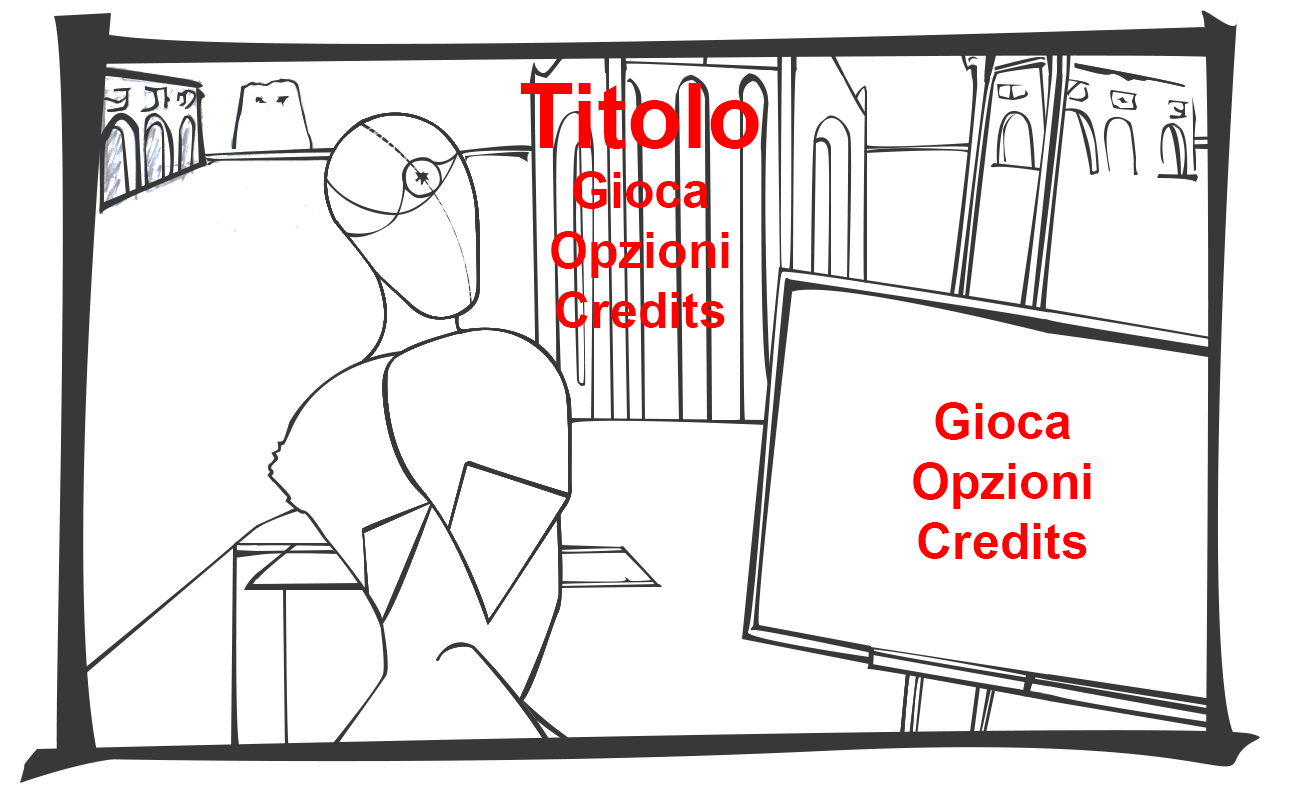
<style>
.page{position:relative;width:1300px;height:800px;background:#ffffff}
.page>*{position:absolute;margin:0}
.t1{font:50px "Arial-BoldMT";color:#ff0000}
.t2{font:90px "Arial-BoldMT";color:#ff0000}
</style>
<div class="page">
<p class="t1" style="left:520px;top:83px;width:239px;height:245px;text-align:center"><span class="t2">Titolo<br></span>Gioca<br>Opzioni<br>Credits</p>
<p class="t1" style="left:913px;top:402px;width:178px;height:157px;text-align:center"><span class="t2"><br></span>Gioca<br>Opzioni<br>Credits</p>
</div>
